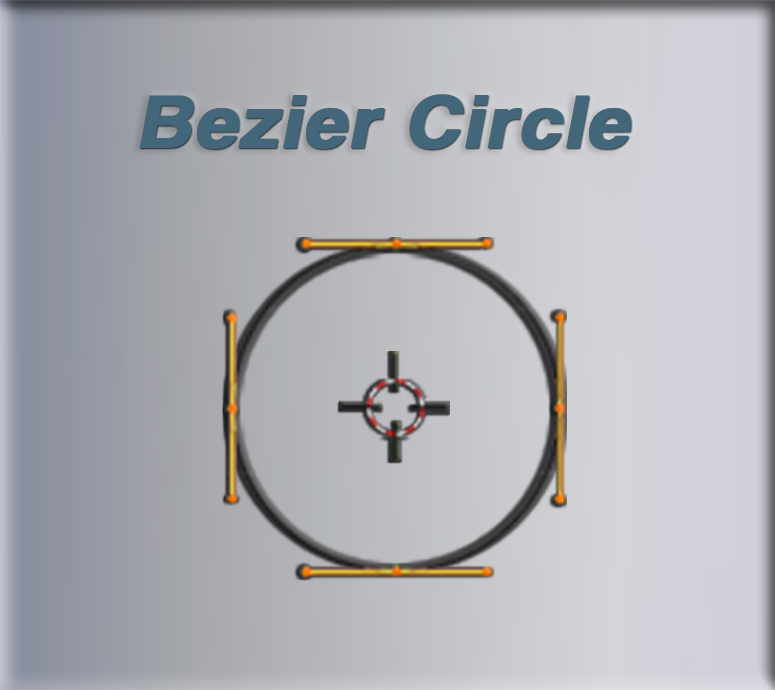
<style>
.page{position:relative;width:775px;height:690px}
.page>*{position:absolute;margin:0}
.t1{font:71.6px "HelveticaLTStd-Bold";color:#42667a;font-weight:bold;font-style:italic;scale:1.08 1}
</style>
<div class="page">
<p class="t1" style="left:139px;top:94px;width:492px;height:56px">Bezier Circle</p>
</div>
